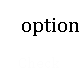
<style>
.page{position:relative;width:80px;height:80px;background:#ffffff}
.page>*{position:absolute;margin:0}
.t1{font:21.3px "Cambria";color:#000000}
</style>
<div class="page">
<p class="t1" style="left:22px;top:18px;width:57px;height:18px">option</p>
</div>
